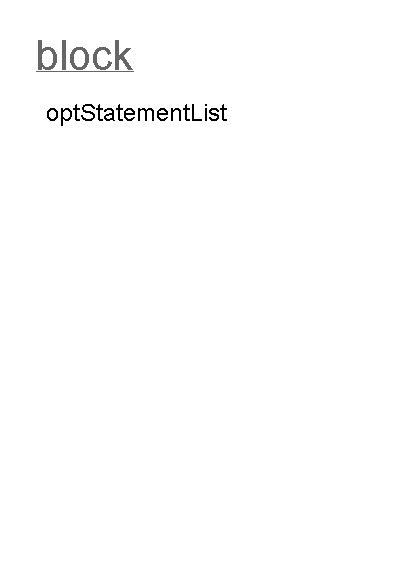
<style>
.page{position:relative;width:396px;height:576px;background:#ffffff}
.page>*{position:absolute;margin:0}
.t1{font:42px "ArialMT";color:#666666}
.t2{font:12px "ArialMT";color:#000000}
</style>
<div class="page">
<p class="t1" style="left:38px;top:40px;width:95px;height:30px">block</p>
<p class="t2" style="left:47px;top:104px;width:180px;height:22px">optStatementList</p>
</div>
